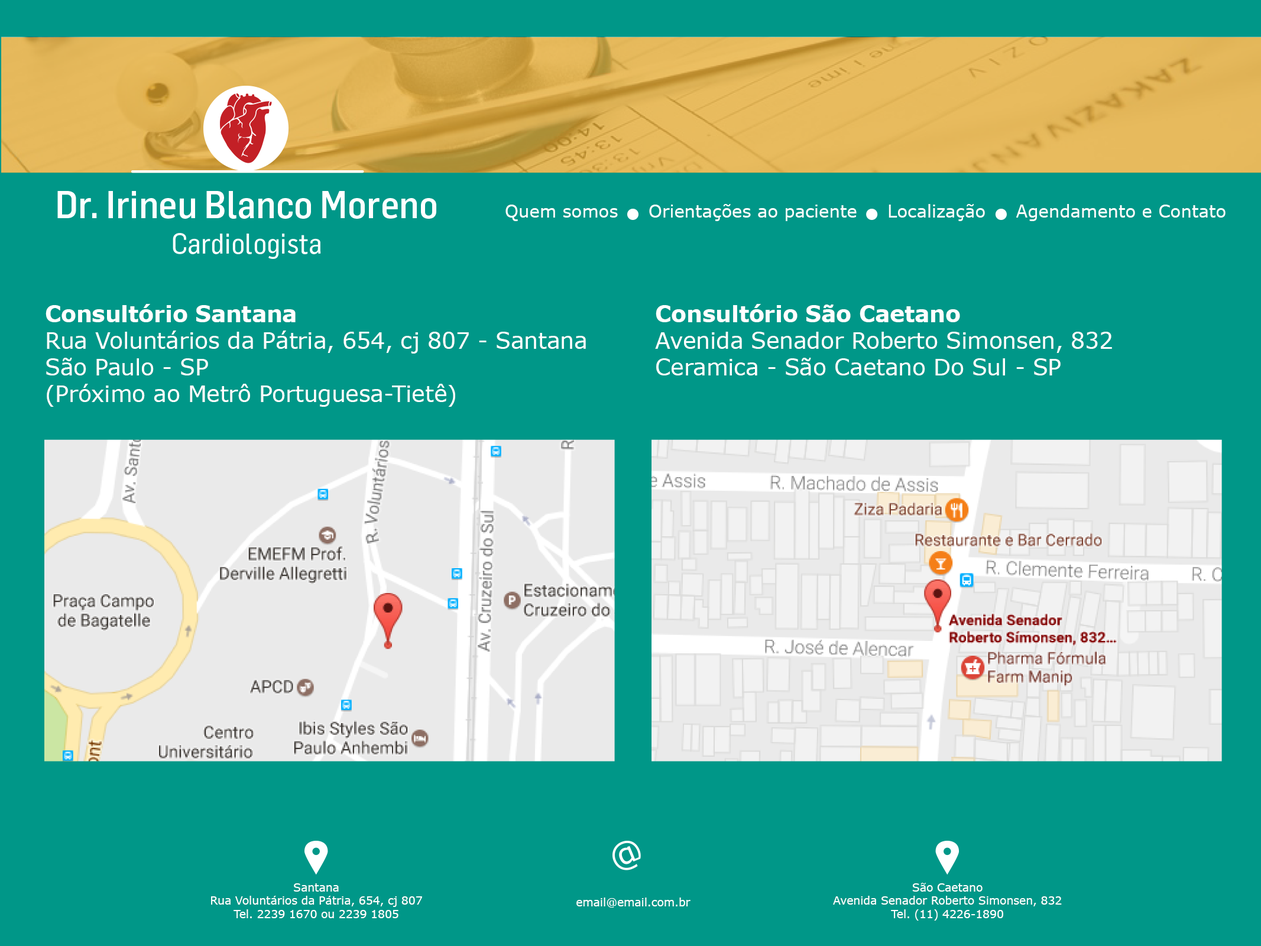
<style>
.page{position:relative;width:1261px;height:946px;background:#009788}
.page>*{position:absolute;margin:0}
.t1{font:17.2px "Verdana";color:#ffffff}
.t2{font:22.2px "Verdana";color:#ffffff}
.t3{font:22.2px "Verdana-Bold";color:#ffffff}
.t4{font:11.1px "Verdana";color:#ffffff}
</style>
<div class="page">
<p class="t1" style="left:505px;top:204px;width:720px;height:17px">Quem somos     Orientações ao paciente     Localização     Agendamento e Contato</p>
<p class="t2" style="left:46px;top:304px;width:540px;height:103px"><span class="t3">Consultório Santana<br></span>Rua Voluntários da Pátria, 654, cj 807 - Santana<br>São Paulo - SP<br>(Próximo ao Metrô Portuguesa-Tietê)</p>
<p class="t2" style="left:655px;top:304px;width:457px;height:71px"><span class="t3">Consultório São Caetano<br></span>Avenida Senador Roberto Simonsen, 832<br>Ceramica - São Caetano Do Sul - SP</p>
<p class="t4" style="left:211px;top:883px;width:211px;height:35px;text-align:center">Santana<br>Rua Voluntários da Pátria, 654, cj 807<br>Tel. 2239 1670 ou 2239 1805</p>
<p class="t4" style="left:833px;top:883px;width:229px;height:37px;text-align:center">São Caetano<br>Avenida Senador Roberto Simonsen, 832<br>Tel. (11) 4226-1890</p>
<p class="t4" style="left:576px;top:897px;width:114px;height:10px">email@email.com.br</p>
</div>
